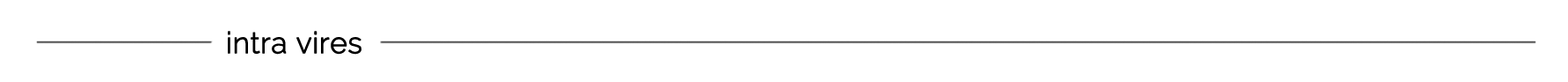
<style>
.page{position:relative;width:1568px;height:82px;background:#ffffff}
.page>*{position:absolute;margin:0}
.t1{font:29.3px "Raleway-Light";color:#000000;font-weight:bold}
</style>
<div class="page">
<p class="t1" style="left:228px;top:31px;width:133px;height:24px">intra vires</p>
</div>
